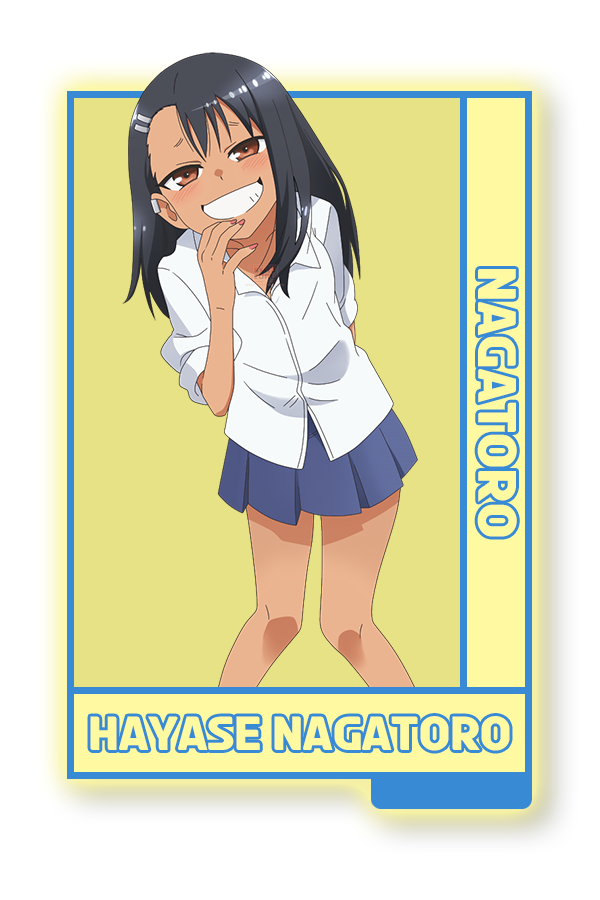
<style>
.page{position:relative;width:600px;height:900px;background:#e7e286}
.page>*{position:absolute;margin:0}
.t1{font:48.8px "aAppleTea";color:#fffaa2}
.t2{font:42.9px "aAppleTea";color:#fffaa2}
</style>
<div class="page">
<p class="t1" style="left:477px;top:269px;width:40px;height:268px;rotate:90deg">NAGATORO</p>
<p class="t2" style="left:90px;top:716px;width:420px;height:35px">HAYASE NAGATORO</p>
</div>
